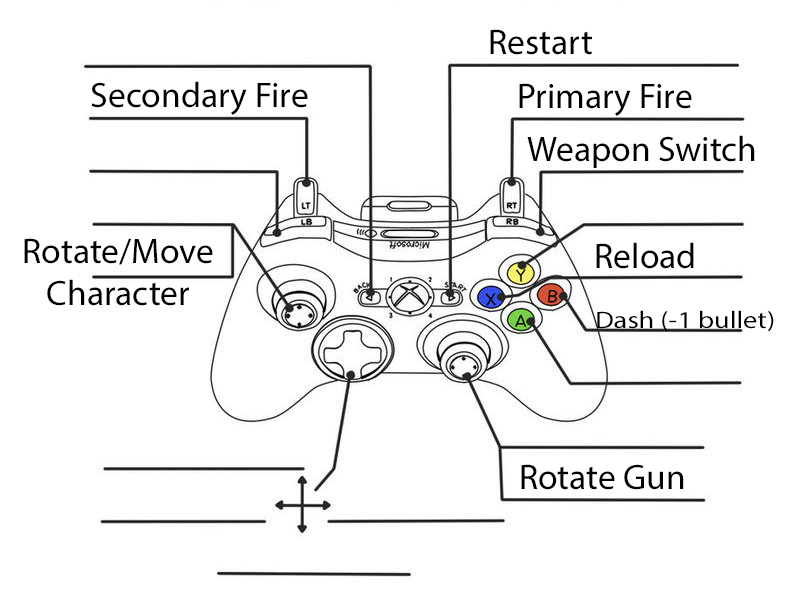
<style>
.page{position:relative;width:785px;height:615px;background:#ffffff}
.page>*{position:absolute;margin:0}
.t1{font:35.6px "MyriadPro-Regular";color:#000000}
.t2{font:24.2px "MyriadPro-Regular";color:#000000;scale:1.17 1}
</style>
<div class="page">
<p class="t1" style="left:490px;top:29px;width:102px;height:26px">Restart</p>
<p class="t1" style="left:91px;top:81px;width:217px;height:34px">Secondary Fire</p>
<p class="t1" style="left:519px;top:83px;width:173px;height:33px">Primary Fire</p>
<p class="t1" style="left:527px;top:135px;width:228px;height:33px">Weapon Switch</p>
<p class="t1" style="left:24px;top:238px;width:189px;height:68px;text-align:center">Rotate/Move<br>Character</p>
<p class="t1" style="left:596px;top:242px;width:98px;height:27px">Reload</p>
<p class="t2" style="left:597px;top:310px;width:177px;height:21px">Dash (-1 bullet)</p>
<p class="t1" style="left:521px;top:464px;width:163px;height:26px">Rotate Gun</p>
</div>
